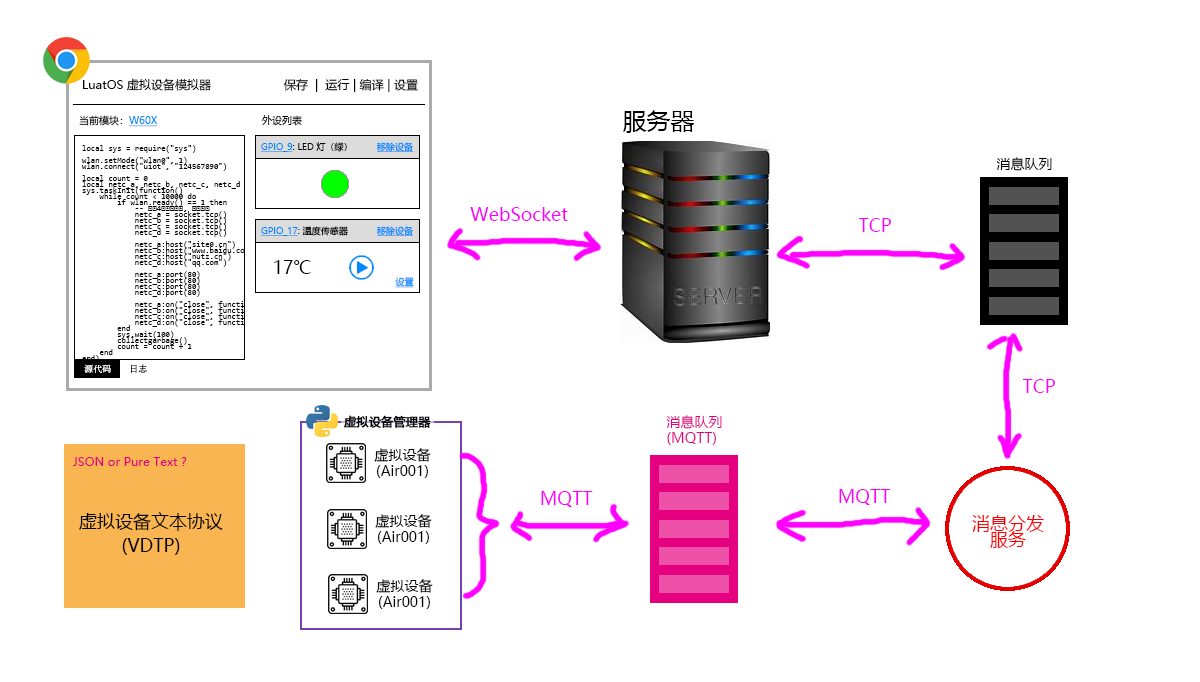
<style>
.page{position:relative;width:1200px;height:682px;background:#ffffff}
.page>*{position:absolute;margin:0}
.t1{font:12px "MicrosoftYaHei";color:#000000}
.t2{font:24px "MicrosoftYaHei";color:#000000}
.t3{font:10px "MicrosoftYaHei";color:#0088ff}
.t4{font:10px "MicrosoftYaHei";color:#0088ff;text-decoration:underline}
.t5{font:10px "MicrosoftYaHei";color:#000000}
.t6{font:8px/6px "Consolas";color:#000000}
.t7{font:9px "MicrosoftYaHei";color:#000000}
.t8{font:9px "MicrosoftYaHei";color:#0088ff;text-decoration:underline}
.t9{font:14px "MicrosoftYaHei";color:#000000}
.t10{font:18px "MicrosoftYaHei";color:#ff00ff}
.t11{font:9px "MicrosoftYaHei";color:#0088ff}
.t12{font:18px "MicrosoftYaHei";color:#000000}
.t13{font:9px "MicrosoftYaHei";text-decoration:underline}
.t14{font:12px "MicrosoftYaHei";color:#000000;font-weight:bold}
.t15{font:14px/16px "MicrosoftYaHei";color:#e4007f}
.t16{font:14px/16px "MicrosoftYaHei";color:#000000}
.t17{font:12px "MicrosoftYaHei";color:#e4007f}
.t18{font:18px/24px "MicrosoftYaHei";color:#000000}
.t19{font:18px/16px "MicrosoftYaHei";color:#ff0000}
</style>
<div class="page">
<p class="t1" style="left:83px;top:78px;width:128px;height:13px">LuatOS 虚拟设备模拟器</p>
<p class="t1" style="left:283px;top:78px;width:135px;height:14px">保存  |  运行 | 编译 | 设置</p>
<p class="t2" style="left:622px;top:110px;width:72px;height:23px">服务器</p>
<p class="t3" style="left:79px;top:115px;width:79px;height:12px">当前模块：<span class="t4">W60X</span></p>
<p class="t5" style="left:261px;top:115px;width:41px;height:11px">外设列表</p>
<p class="t6" style="left:82px;top:145px;width:373px;height:230px">local sys = require("sys")<br><br>wlan.setMode("wlan0", 1)<br>wlan.connect("uiot", "124567890")<br><br>local count = 0<br>local netc_a, netc_b, netc_c, netc_d<br>sys.taskInit(function()<br>    while count &lt; 10000 do<br>        if wlan.ready() == 1 then<br>            -- 新建4个连接对象, 但不连接<br>            netc_a = socket.tcp()<br>            netc_b = socket.tcp()<br>            netc_c = socket.tcp()<br>            netc_d = socket.tcp()<br><br>            netc_a:host("site0.cn")<br>            netc_b:host("www.baidu.com")<br>            netc_c:host("nutz.cn")<br>            netc_d:host("qq.com")<br><br>            netc_a:port(80)<br>            netc_b:port(80)<br>            netc_c:port(80)<br>            netc_d:port(80)<br><br>            netc_a:on("close", function() log.info("test", "netc_a close event") end)<br>            netc_b:on("close", function() log.info("test", "netc_b close event") end)<br>            netc_c:on("close", function() log.info("test", "netc_c close event") end)<br>            netc_d:on("close", function() log.info("test", "netc_d close event") end)<br>        end<br>        sys.wait(100)<br>        collectgarbage()<br>        count = count + 1<br>    end<br>end)<br><br>sys.run()</p>
<p class="t7" style="left:261px;top:142px;width:86px;height:10px"><span class="t8">GPIO_9</span>: LED 灯（绿）</p>
<p class="t8" style="left:376px;top:142px;width:38px;height:10px">移除设备</p>
<p class="t9" style="left:996px;top:157px;width:56px;height:14px">消息队列</p>
<p class="t10" style="left:470px;top:207px;width:98px;height:14px">WebSocket</p>
<p class="t10" style="left:858px;top:218px;width:33px;height:14px">TCP</p>
<p class="t8" style="left:261px;top:226px;width:87px;height:10px">GPIO_17<span class="t11">: 温度传感器</span></p>
<p class="t8" style="left:376px;top:226px;width:38px;height:10px">移除设备</p>
<p class="t12" style="left:274px;top:260px;width:37px;height:14px">17℃</p>
<p class="t13" style="left:395px;top:277px;width:19px;height:11px">设置</p>
<p class="t10" style="left:1022px;top:379px;width:33px;height:14px">TCP</p>
<p class="t14" style="left:343px;top:415px;width:88px;height:13px">虚拟设备管理器</p>
<p class="t15" style="left:666px;top:415px;width:56px;height:30px">消息队列<br>(MQTT)</p>
<p class="t16" style="left:374px;top:448px;width:57px;height:30px;text-align:center">虚拟设备<br>(Air001)</p>
<p class="t17" style="left:73px;top:457px;width:114px;height:9px">JSON or Pure Text ?</p>
<p class="t10" style="left:541px;top:491px;width:52px;height:16px">MQTT</p>
<p class="t10" style="left:839px;top:489px;width:52px;height:16px">MQTT</p>
<p class="t18" style="left:79px;top:512px;width:144px;height:43px;text-align:center">虚拟设备文本协议<br>(VDTP)</p>
<p class="t16" style="left:375px;top:514px;width:57px;height:30px;text-align:center">虚拟设备<br>(Air001)</p>
<p class="t19" style="left:972px;top:515px;width:72px;height:33px;text-align:center">消息分发<br>服务</p>
<p class="t16" style="left:376px;top:579px;width:57px;height:30px;text-align:center">虚拟设备<br>(Air001)</p>
</div>
